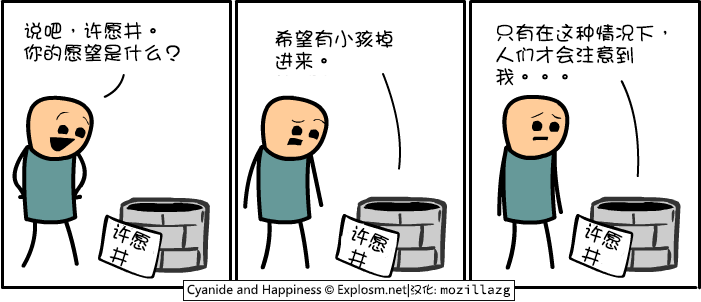
<style>
.page{position:relative;width:701px;height:302px;background:#ffffff}
.page>*{position:absolute;margin:0}
.t1{font:20px/22px "DFGirl";color:#000000}
</style>
<div class="page">
<p class="t1" style="left:23px;top:22px;width:157px;height:40px">说吧，许愿井。<br>你的愿望是什么？</p>
<p class="t1" style="left:275px;top:29px;width:118px;height:41px">希望有小孩掉<br>进来。</p>
<p class="t1" style="left:495px;top:23px;width:172px;height:63px">只有在这种情况下，<br>人们才会注意到<br>我。。。</p>
<p class="t1" style="left:109px;top:223px;width:42px;height:44px;rotate:22deg">许愿<br> 井</p>
<p class="t1" style="left:348px;top:225px;width:41px;height:44px;rotate:22deg">许愿<br> 井</p>
<p class="t1" style="left:581px;top:223px;width:42px;height:43px;rotate:22deg">许愿<br> 井</p>
</div>
